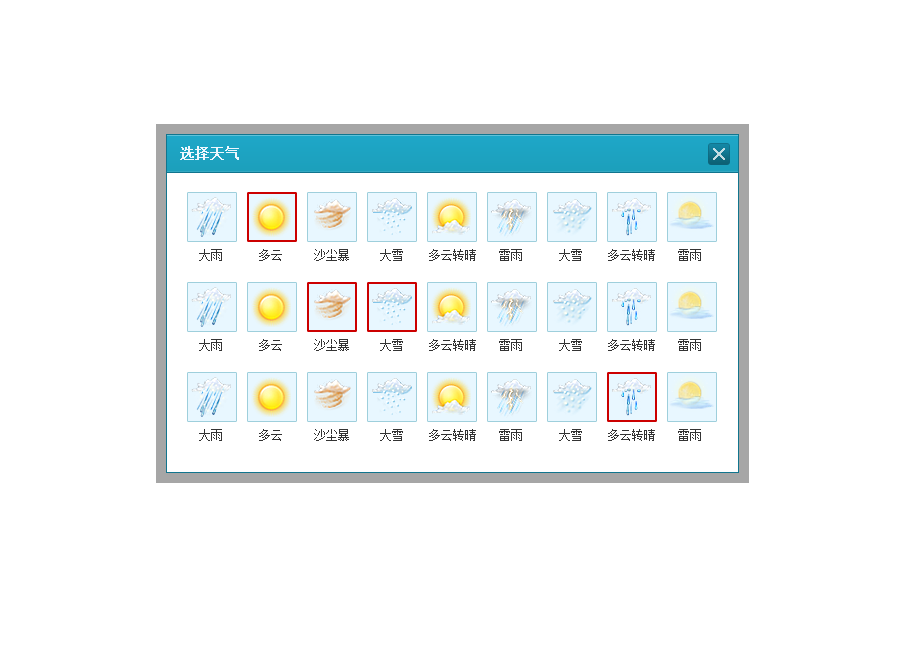
<style>
.page{position:relative;width:904px;height:657px;background:#ffffff}
.page>*{position:absolute;margin:0}
.t1{font:14px "SimSun";color:#eef7fe;font-weight:bold}
.t2{font:12px "SimSun";color:#333333}
</style>
<div class="page">
<p class="t1" style="left:180px;top:146px;width:59px;height:14px">选择天气</p>
<p class="t2" style="left:199px;top:249px;width:23px;height:12px">大雨</p>
<p class="t2" style="left:259px;top:249px;width:23px;height:12px">多云</p>
<p class="t2" style="left:314px;top:249px;width:35px;height:12px">沙尘暴</p>
<p class="t2" style="left:380px;top:249px;width:23px;height:12px">大雪</p>
<p class="t2" style="left:429px;top:249px;width:47px;height:12px">多云转晴</p>
<p class="t2" style="left:499px;top:249px;width:23px;height:12px">雷雨</p>
<p class="t2" style="left:559px;top:249px;width:23px;height:12px">大雪</p>
<p class="t2" style="left:608px;top:249px;width:47px;height:12px">多云转晴</p>
<p class="t2" style="left:678px;top:249px;width:23px;height:12px">雷雨</p>
<p class="t2" style="left:199px;top:339px;width:23px;height:12px">大雨</p>
<p class="t2" style="left:259px;top:339px;width:23px;height:12px">多云</p>
<p class="t2" style="left:314px;top:339px;width:35px;height:12px">沙尘暴</p>
<p class="t2" style="left:380px;top:339px;width:23px;height:12px">大雪</p>
<p class="t2" style="left:429px;top:339px;width:47px;height:12px">多云转晴</p>
<p class="t2" style="left:499px;top:339px;width:23px;height:12px">雷雨</p>
<p class="t2" style="left:559px;top:339px;width:23px;height:12px">大雪</p>
<p class="t2" style="left:608px;top:339px;width:47px;height:12px">多云转晴</p>
<p class="t2" style="left:678px;top:339px;width:23px;height:12px">雷雨</p>
<p class="t2" style="left:199px;top:429px;width:23px;height:12px">大雨</p>
<p class="t2" style="left:259px;top:429px;width:23px;height:12px">多云</p>
<p class="t2" style="left:314px;top:429px;width:35px;height:12px">沙尘暴</p>
<p class="t2" style="left:380px;top:429px;width:23px;height:12px">大雪</p>
<p class="t2" style="left:429px;top:429px;width:47px;height:12px">多云转晴</p>
<p class="t2" style="left:499px;top:429px;width:23px;height:12px">雷雨</p>
<p class="t2" style="left:559px;top:429px;width:23px;height:12px">大雪</p>
<p class="t2" style="left:608px;top:429px;width:47px;height:12px">多云转晴</p>
<p class="t2" style="left:678px;top:429px;width:23px;height:12px">雷雨</p>
</div>
